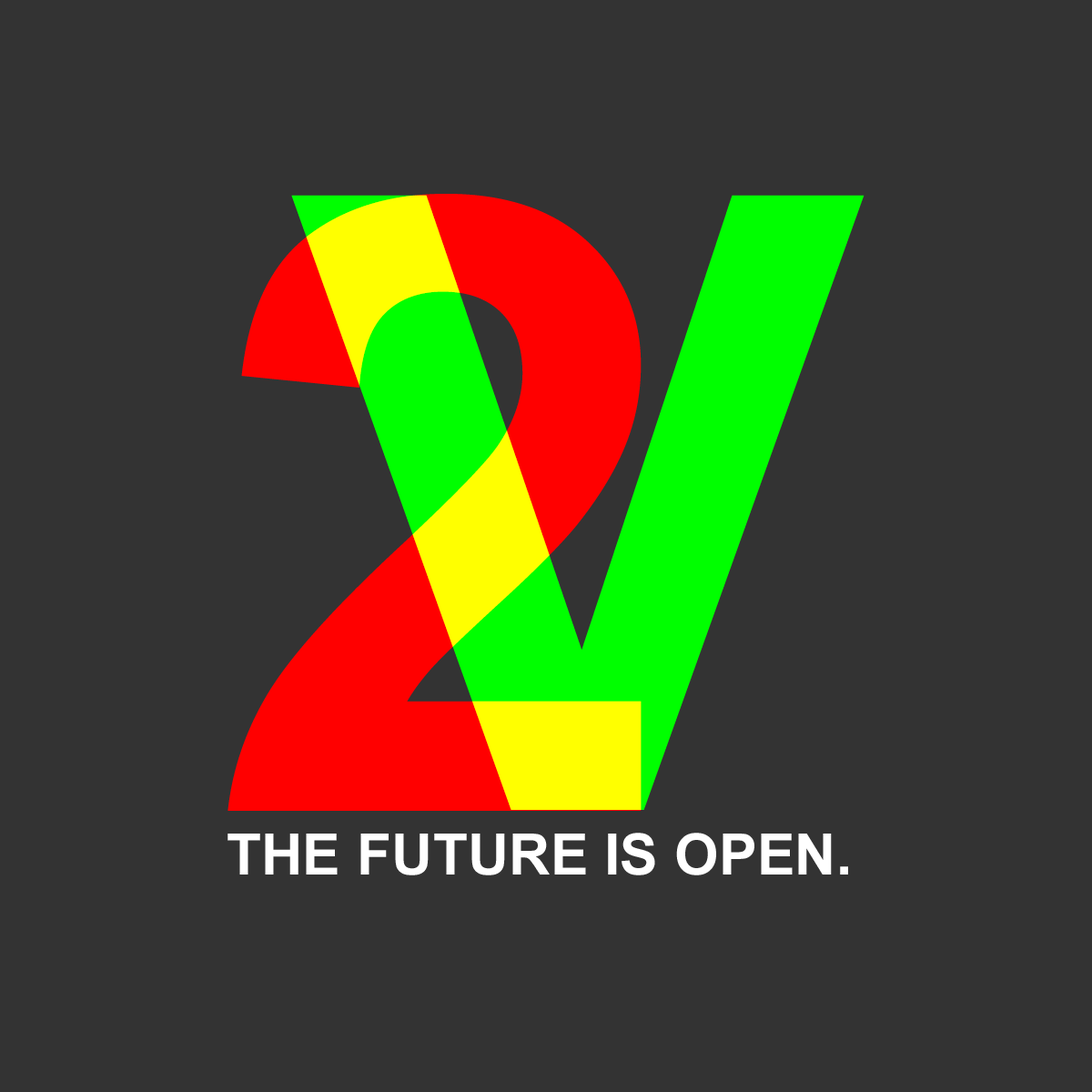
<style>
.page{position:relative;width:1092px;height:1092px;background:#333333}
.page>*{position:absolute;margin:0}
.t1{font:858.3px "Arial-BoldMT";color:#ff0000}
.t2{font:858.3px "Arial-BoldMT";color:#00ff00}
.t3{font:57.2px "Arial-BoldMT";color:#ffffff}
</style>
<div class="page">
<p class="t1" style="left:227px;top:194px;width:415px;height:617px">2</p>
<p class="t2" style="left:291px;top:195px;width:573px;height:615px">V</p>
<p class="t3" style="left:227px;top:833px;width:621px;height:42px">THE FUTURE IS OPEN.</p>
</div>
